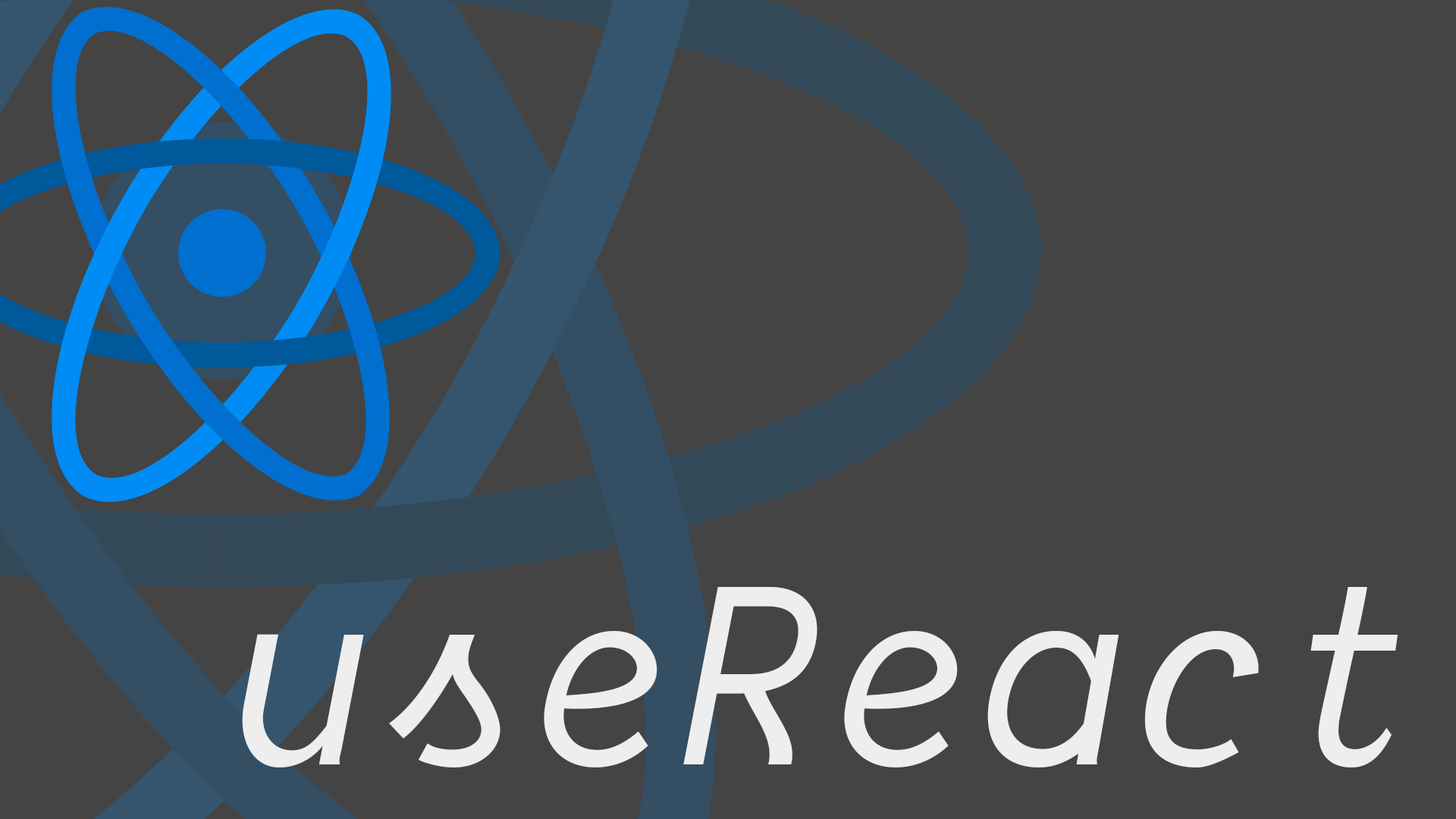
<style>
.page{position:relative;width:1456px;height:819px;background:#444444}
.page>*{position:absolute;margin:0}
.t1{font:273.2px "DankMono-Italic";color:#eeeeee}
</style>
<div class="page">
<p class="t1" style="left:242px;top:587px;width:1156px;height:181px">useReact</p>
</div>
